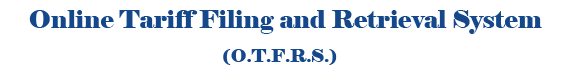
<style>
.page{position:relative;width:567px;height:84px;background:#ffffff}
.page>*{position:absolute;margin:0}
.t1{font:25px "Elephant-Regular";color:#15488a}
.t2{font:18px "Elephant-Regular";color:#15488a}
</style>
<div class="page">
<p class="t1" style="left:29px;top:10px;width:513px;height:24px">Online Tariff Filing and Retrieval System</p>
<p class="t2" style="left:223px;top:49px;width:114px;height:16px">(O.T.F.R.S.)</p>
</div>
